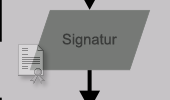
<style>
.page{position:relative;width:170px;height:100px;background:#c6c3c6}
.page>*{position:absolute;margin:0}
.t1{font:14.7px "ArialMT";color:#3b3c3b}
</style>
<div class="page">
<p class="t1" style="left:62px;top:33px;width:55px;height:15px">Signatur</p>
</div>
